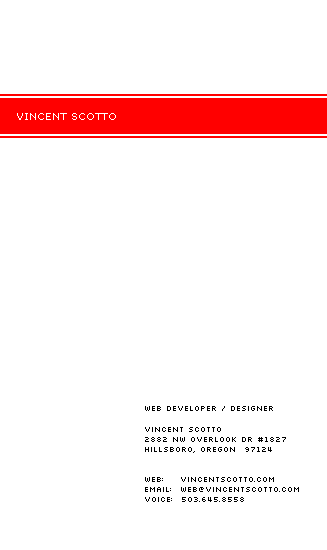
<style>
.page{position:relative;width:327px;height:550px;background:#ffffff}
.page>*{position:absolute;margin:0}
.t1{font:12px "Verdana";color:#ffffff;font-variant:small-caps}
.t2{font:8px "Silkscreen";color:#000000}
</style>
<div class="page">
<p class="t1" style="left:17px;top:113px;width:99px;height:7px">vincent scotto</p>
<p class="t2" style="left:145px;top:406px;width:128px;height:5px">web developer / designer</p>
<p class="t2" style="left:145px;top:437px;width:141px;height:5px">2882 nw overlook dr #1827</p>
<p class="t2" style="left:145px;top:427px;width:76px;height:5px">vincent scotto</p>
<p class="t2" style="left:145px;top:447px;width:127px;height:6px">hillsboro, oregon  97124</p>
<p class="t2" style="left:145px;top:477px;width:129px;height:5px">web:    vincentscotto.com</p>
<p class="t2" style="left:145px;top:497px;width:99px;height:5px">Voice:  503.645.8558</p>
<p class="t2" style="left:145px;top:487px;width:154px;height:5px">email:  web@vincentscotto.com</p>
</div>
